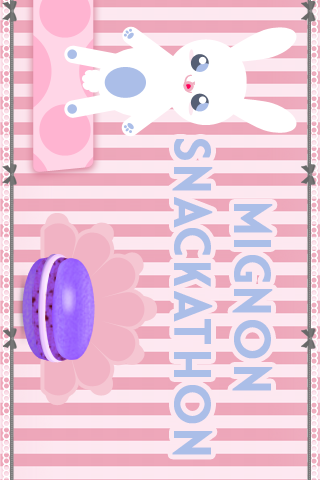
<style>
.page{position:relative;width:320px;height:480px}
.page>*{position:absolute;margin:0}
.t1{font:22.7px "QuicksandBook-Regular";color:#efaec0;scale:1.37 1}
.t2{font:50px "MarketDeco";letter-spacing:0.04em;color:#abbee8;font-weight:bold}
</style>
<div class="page">
<p class="t1" style="left:184px;top:74px;width:8px;height:19px;rotate:180deg">)</p>
<p class="t2" style="left:172px;top:139px;width:101px;height:316px;text-align:center;rotate:90deg">mignon<br>snackathon</p>
</div>
